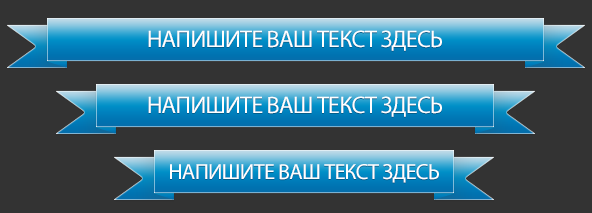
<style>
.page{position:relative;width:592px;height:213px;background:#333333}
.page>*{position:absolute;margin:0}
.t1{font:24px "MyriadPro-Regular";letter-spacing:-0.03em;color:#ffffff;text-transform:uppercase}
.t2{font:22px "MyriadPro-Regular";letter-spacing:-0.03em;color:#ffffff;text-transform:uppercase}
</style>
<div class="page">
<p class="t1" style="left:148px;top:30px;width:294px;height:21px">НАПИШИТЕ ВАШ ТЕКСТ ЗДЕСЬ</p>
<p class="t1" style="left:148px;top:96px;width:294px;height:21px">НАПИШИТЕ ВАШ ТЕКСТ ЗДЕСЬ</p>
<p class="t2" style="left:170px;top:164px;width:269px;height:19px">НАПИШИТЕ ВАШ ТЕКСТ ЗДЕСЬ</p>
</div>
